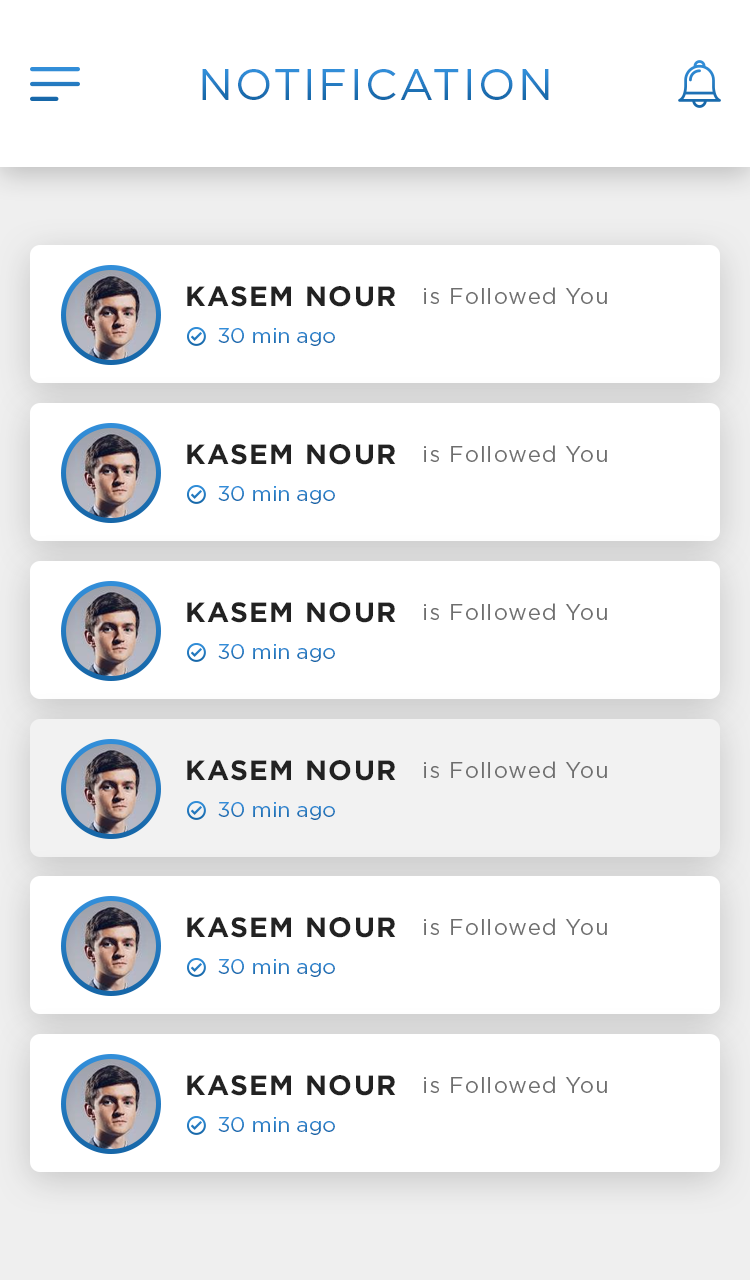
<style>
.page{position:relative;width:750px;height:1280px;background:#ffffff}
.page>*{position:absolute;margin:0}
.t1{font:44px "Gotham-Book";letter-spacing:0.05em;color:#267dc3;text-transform:uppercase}
.t2{font:28px "Gotham-Bold";letter-spacing:0.05em;color:#222222}
.t3{font:22px "Gotham-Book";letter-spacing:0.05em;color:#6e6e6e}
.t4{font:21px "Gotham-Book";color:#267dc3}
</style>
<div class="page">
<p class="t1" style="left:202px;top:69px;width:347px;height:31px">NOTIFICATION</p>
<p class="t2" style="left:187px;top:286px;width:209px;height:21px">KASEM NOUR</p>
<p class="t3" style="left:424px;top:287px;width:183px;height:17px">is Followed You</p>
<p class="t4" style="left:218px;top:328px;width:117px;height:18px">30 min ago</p>
<p class="t2" style="left:187px;top:444px;width:209px;height:21px">KASEM NOUR</p>
<p class="t3" style="left:424px;top:445px;width:183px;height:17px">is Followed You</p>
<p class="t4" style="left:218px;top:486px;width:117px;height:18px">30 min ago</p>
<p class="t2" style="left:187px;top:602px;width:209px;height:21px">KASEM NOUR</p>
<p class="t3" style="left:424px;top:603px;width:183px;height:17px">is Followed You</p>
<p class="t4" style="left:218px;top:644px;width:117px;height:18px">30 min ago</p>
<p class="t2" style="left:187px;top:760px;width:209px;height:21px">KASEM NOUR</p>
<p class="t3" style="left:424px;top:761px;width:183px;height:17px">is Followed You</p>
<p class="t4" style="left:218px;top:802px;width:117px;height:18px">30 min ago</p>
<p class="t2" style="left:187px;top:917px;width:209px;height:21px">KASEM NOUR</p>
<p class="t3" style="left:424px;top:918px;width:183px;height:17px">is Followed You</p>
<p class="t4" style="left:218px;top:959px;width:117px;height:18px">30 min ago</p>
<p class="t2" style="left:187px;top:1075px;width:209px;height:21px">KASEM NOUR</p>
<p class="t3" style="left:424px;top:1076px;width:183px;height:17px">is Followed You</p>
<p class="t4" style="left:218px;top:1117px;width:117px;height:18px">30 min ago</p>
</div>
